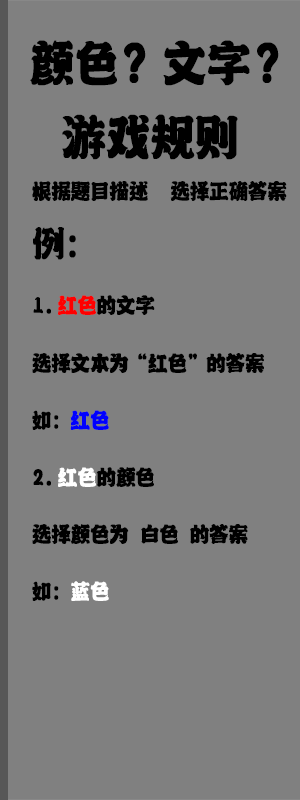
<style>
.page{position:relative;width:300px;height:800px;background:#808080}
.page>*{position:absolute;margin:0}
.t1{font:57.1px "-";letter-spacing:-0.02em;color:#000000;font-weight:bold;scale:0.88 1}
.t2{font:25px/57.1px "-";letter-spacing:-0.02em;color:#000000;font-weight:bold;scale:0.88 1}
.t3{font:41.7px/57.1px "-";letter-spacing:-0.02em;color:#000000;font-weight:bold;scale:0.88 1}
.t4{font:25px/57.1px "-";letter-spacing:-0.02em;color:#fe0000;font-weight:bold;scale:0.88 1}
.t5{font:25px/57.1px "-";letter-spacing:-0.02em;color:#0000ff;font-weight:bold;scale:0.88 1}
.t6{font:25px/57.1px "-";letter-spacing:-0.02em;color:#ffffff;font-weight:bold;scale:0.88 1}
</style>
<div class="page">
<p class="t1" style="left:30px;top:40px;width:249px;height:46px">颜色？文字？</p>
<p class="t1" style="left:62px;top:114px;width:176px;height:46px">游戏规则</p>
<p class="t2" style="left:32px;top:181px;width:255px;height:420px">根据题目描述  选择正确答案<br><span class="t3">例：<br></span>1.<span class="t4">红色</span>的文字<br>选择文本为“红色”的答案<br>如：<span class="t5">红色<br></span>2.<span class="t6">红色</span>的颜色<br>选择颜色为 白色 的答案<br>如：<span class="t6">蓝色</span></p>
</div>
